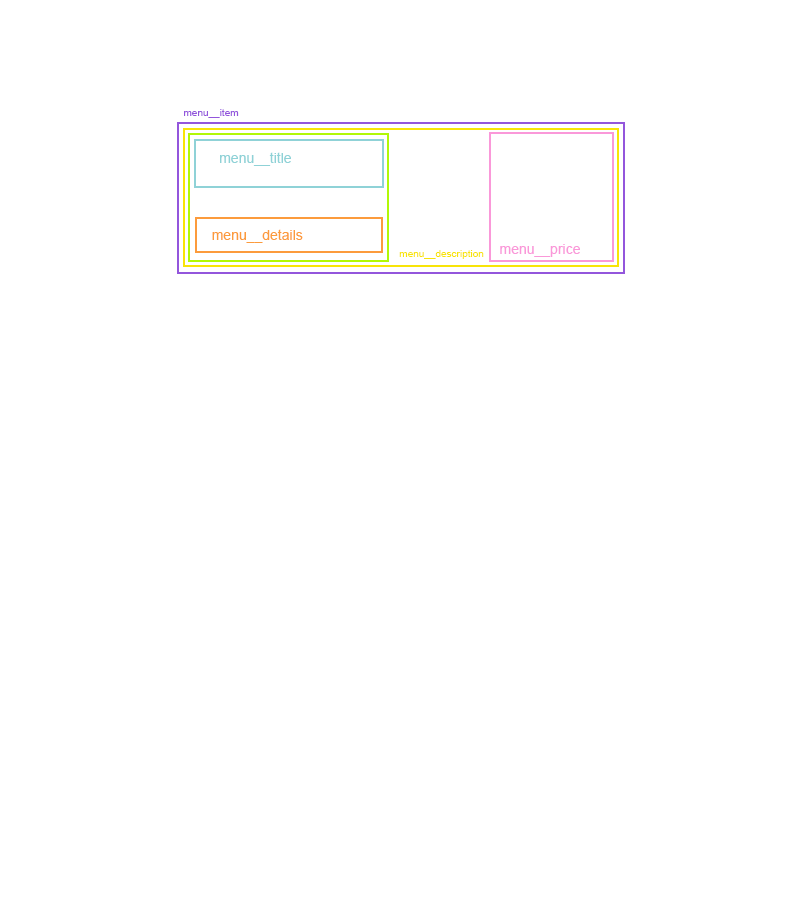
<style>
.page{position:relative;width:800px;height:900px;background:#ffffff}
.page>*{position:absolute;margin:0}
.t1{font:10px "ArialMT";color:#9356dc}
.t2{font:14px "ArialMT";color:#8fd2d7}
.t3{font:14px "ArialMT";color:#fc9b3c}
.t4{font:14px "ArialMT";color:#fa98d9}
.t5{font:10px "ArialMT";color:#f8e408}
</style>
<div class="page">
<p class="t1" style="left:184px;top:109px;width:55px;height:9px">menu__item</p>
<p class="t2" style="left:220px;top:152px;width:71px;height:14px">menu__title</p>
<p class="t3" style="left:212px;top:229px;width:91px;height:14px">menu__details</p>
<p class="t4" style="left:500px;top:244px;width:80px;height:13px">menu__price</p>
<p class="t5" style="left:399px;top:250px;width:85px;height:9px">menu__description</p>
</div>
